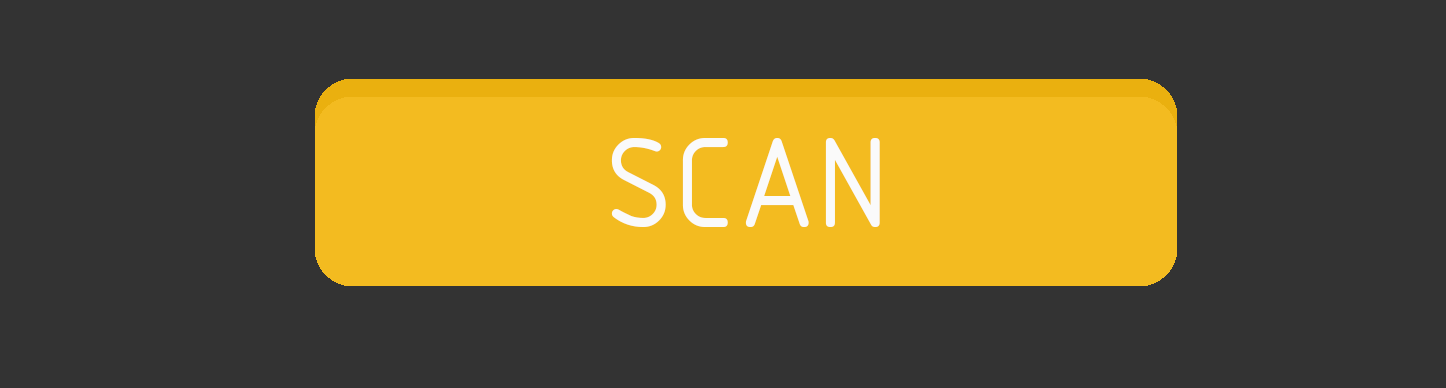
<style>
.page{position:relative;width:1446px;height:388px;background:#333333}
.page>*{position:absolute;margin:0}
.t1{font:125px "GOST-Common";color:#fafafa}
</style>
<div class="page">
<p class="t1" style="left:611px;top:138px;width:269px;height:89px">SCAN</p>
</div>
